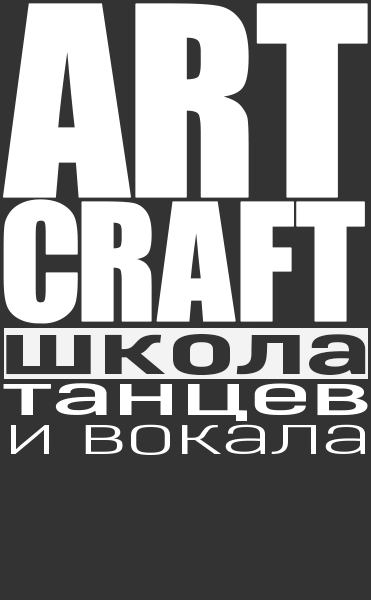
<style>
.page{position:relative;width:371px;height:600px;background:#333333}
.page>*{position:absolute;margin:0}
.t1{font:67.3px "KelsonSans-BoldRU";color:#333333;scale:1.84 1}
.t2{font:53.3px "KelsonSans-RegularRU";color:#ffffff;scale:2.26 1}
.t3{font:49.7px "KelsonSans-LightRU";color:#ffffff;scale:2.09 1}
</style>
<div class="page">
<p class="t1" style="left:6px;top:334px;width:360px;height:41px">школа</p>
<p class="t2" style="left:3px;top:383px;width:365px;height:38px">танцев</p>
<p class="t3" style="left:11px;top:424px;width:354px;height:31px">и вокала</p>
</div>
